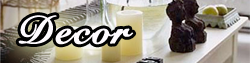
<style>
.page{position:relative;width:250px;height:63px}
.page>*{position:absolute;margin:0}
.t1{font:37.5px "SnellRoundhand-Bold";letter-spacing:0.05em;color:#fefbff;font-weight:bold}
</style>
<div class="page">
<p class="t1" style="left:18px;top:15px;width:116px;height:30px">Decor</p>
</div>
